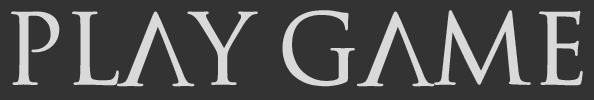
<style>
.page{position:relative;width:594px;height:100px;background:#333333}
.page>*{position:absolute;margin:0}
.t1{font:95.5px "SpaceandAstronomy";color:#d9d9d9}
</style>
<div class="page">
<p class="t1" style="left:11px;top:10px;width:572px;height:77px">PLAY GAME</p>
</div>
